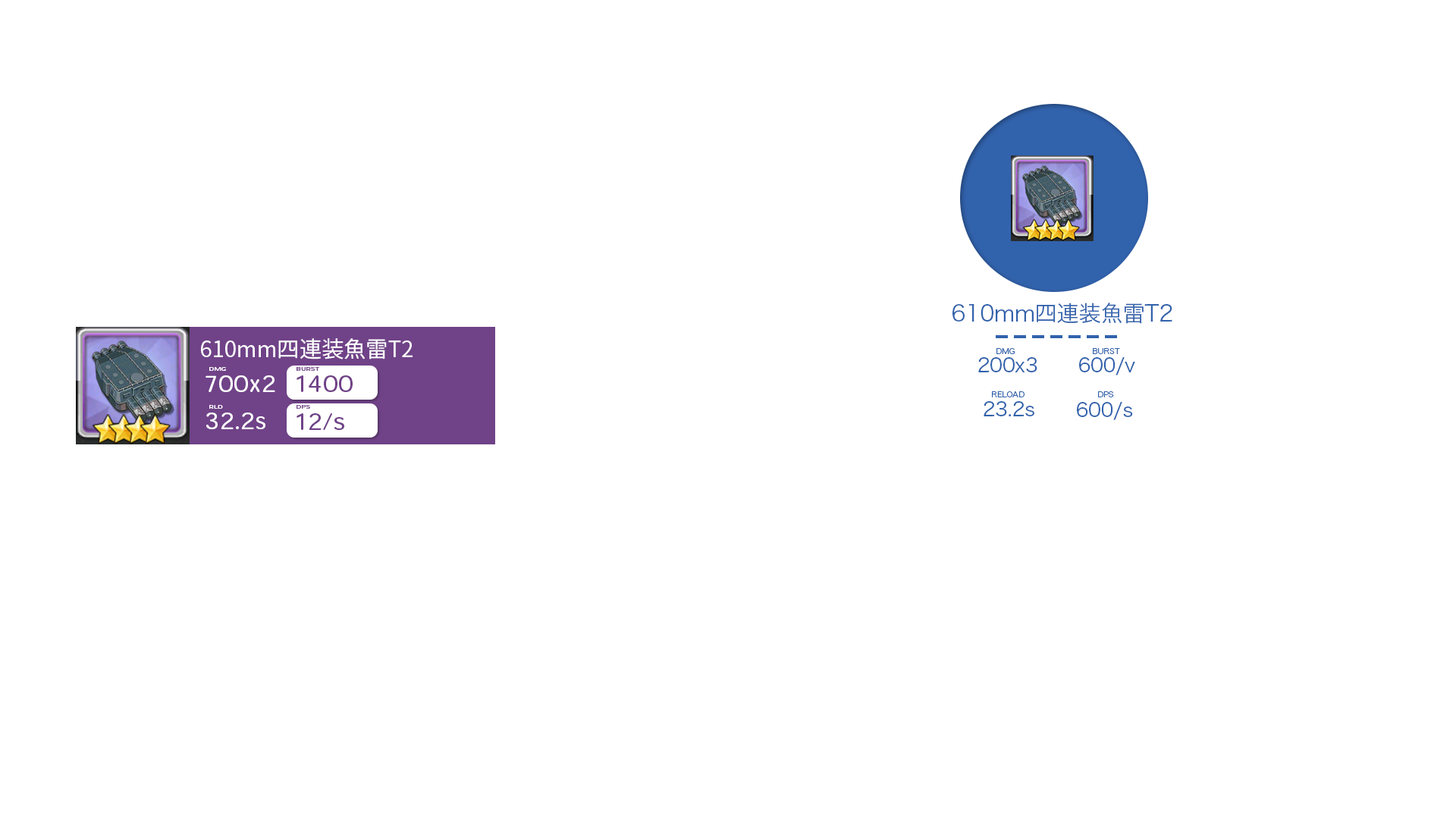
<style>
.page{position:relative;width:1456px;height:819px;background:#ffffff}
.page>*{position:absolute;margin:0}
.t1{font:22.2px "HiraKakuPro-W3";letter-spacing:-0.01em;color:#3162ac}
.t2{font:22.3px "NotoSansCJKjp-Regular";letter-spacing:-0.01em;color:#ffffff}
.t3{font:7.9px "HiraKakuPro-W3";letter-spacing:-0.01em;color:#3162ac}
.t4{font:19.4px "HiraKakuPro-W3";letter-spacing:-0.01em;color:#3162ac}
.t5{font:22.3px "HeiseiMaruGoStd-W4";letter-spacing:-0.01em;color:#ffffff}
.t6{font:4.4px "HeiseiMaruGoStd-W4";letter-spacing:-0.01em;color:#ffffff;scale:1.68 1}
.t7{font:22.3px "HeiseiMaruGoStd-W4";letter-spacing:-0.01em;color:#704288}
.t8{font:4.4px "HeiseiMaruGoStd-W4";letter-spacing:-0.01em;color:#704288;scale:1.68 1}
</style>
<div class="page">
<p class="t1" style="left:952px;top:303px;width:220px;height:21px">610mm四連装魚雷T2</p>
<p class="t2" style="left:201px;top:338px;width:212px;height:21px">610mm四連装魚雷T2</p>
<p class="t3" style="left:996px;top:348px;width:19px;height:6px">DMG</p>
<p class="t3" style="left:1093px;top:348px;width:27px;height:6px">BURST</p>
<p class="t4" style="left:978px;top:357px;width:59px;height:15px">200x3</p>
<p class="t4" style="left:1079px;top:357px;width:56px;height:18px">600/v</p>
<p class="t5" style="left:206px;top:375px;width:69px;height:17px">700x2</p>
<p class="t6" style="left:209px;top:367px;width:17px;height:4px">DMG</p>
<p class="t7" style="left:297px;top:375px;width:56px;height:17px">1400</p>
<p class="t8" style="left:297px;top:367px;width:22px;height:4px">BURST</p>
<p class="t4" style="left:984px;top:401px;width:50px;height:15px">23.2s</p>
<p class="t3" style="left:992px;top:391px;width:32px;height:6px">RELOAD</p>
<p class="t4" style="left:1077px;top:402px;width:56px;height:18px">600/s</p>
<p class="t3" style="left:1098px;top:391px;width:16px;height:6px">DPS</p>
<p class="t5" style="left:206px;top:413px;width:59px;height:16px">32.2s</p>
<p class="t6" style="left:209px;top:405px;width:14px;height:4px">RLD</p>
<p class="t7" style="left:297px;top:413px;width:47px;height:17px">12/s</p>
<p class="t8" style="left:297px;top:405px;width:13px;height:4px">DPS</p>
</div>
